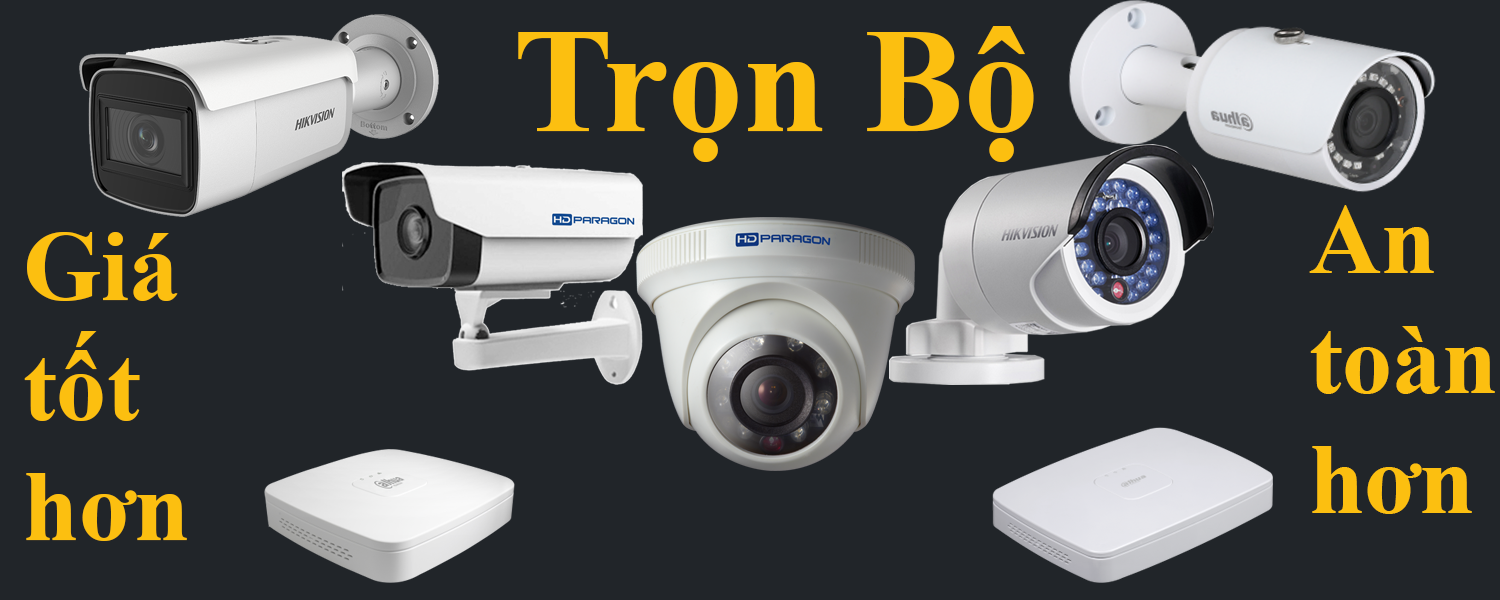
<style>
.page{position:relative;width:1500px;height:600px;background:#212529}
.page>*{position:absolute;margin:0}
.t1{font:150px "TimesNewRomanPS-BoldMT";color:#fcbf10}
.t2{font:100px "TimesNewRomanPS-BoldMT";color:#fcbf10}
</style>
<div class="page">
<p class="t1" style="left:518px;top:26px;width:516px;height:136px">Trọn Bộ</p>
<p class="t2" style="left:1309px;top:205px;width:186px;height:309px">An<br>toàn<br>hơn</p>
<p class="t2" style="left:24px;top:232px;width:163px;height:309px">Giá<br>tốt<br>hơn</p>
</div>
